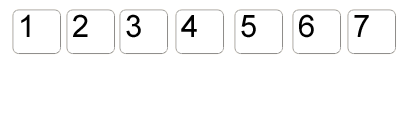
<style>
.page{position:relative;width:397px;height:115px;background:#ffffff}
.page>*{position:absolute;margin:0}
.t1{font:31px "ArialMT";letter-spacing:0.56em;color:#000000}
</style>
<div class="page">
<p class="t1" style="left:21px;top:14px;width:9px;height:23px">1</p>
<p class="t1" style="left:73px;top:14px;width:15px;height:23px">2</p>
<p class="t1" style="left:126px;top:14px;width:15px;height:24px">3</p>
<p class="t1" style="left:181px;top:15px;width:16px;height:22px">4</p>
<p class="t1" style="left:241px;top:15px;width:15px;height:23px">5</p>
<p class="t1" style="left:299px;top:14px;width:15px;height:24px">6</p>
<p class="t1" style="left:354px;top:15px;width:15px;height:22px">7</p>
</div>
